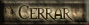
<style>
.page{position:relative;width:89px;height:25px}
.page>*{position:absolute;margin:0}
.t1{font:18px "Morpheus";color:#342108}
</style>
<div class="page">
<p class="t1" style="left:18px;top:5px;width:57px;height:16px">Cerrar</p>
</div>
